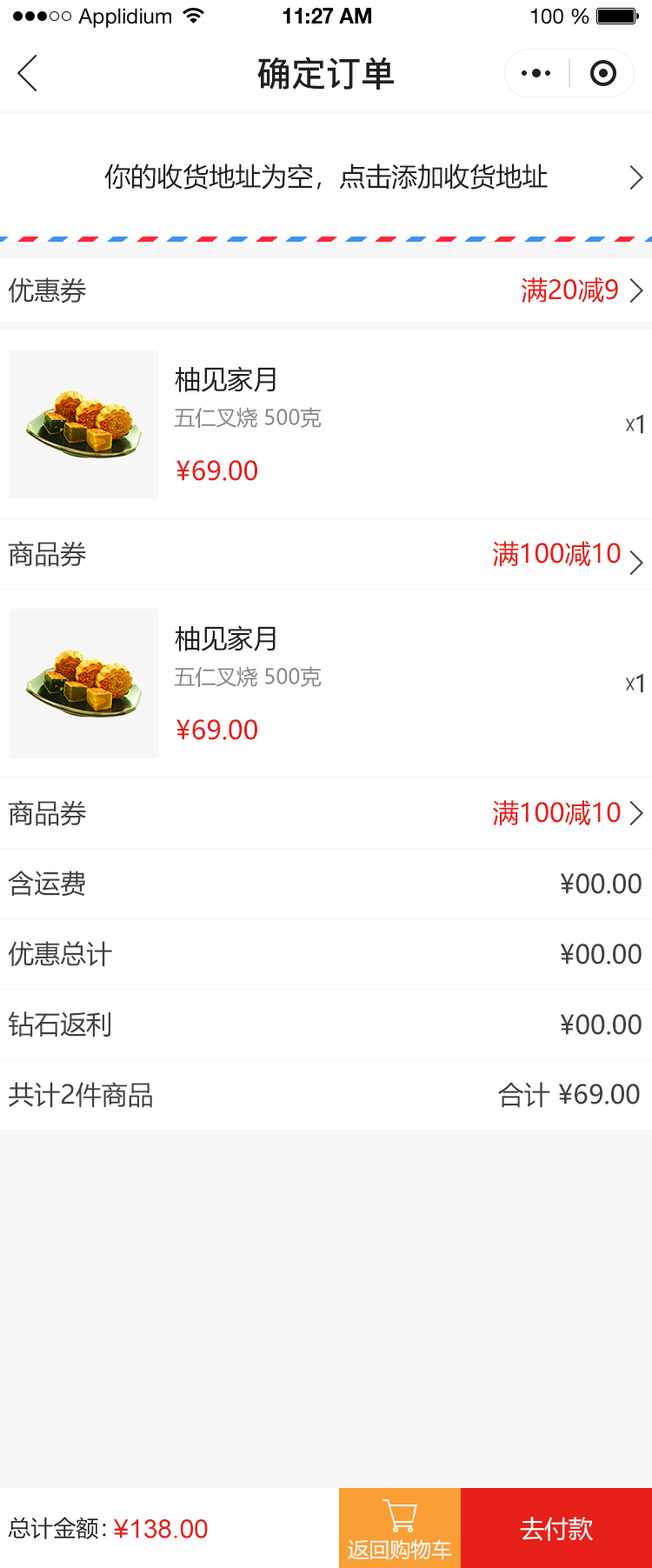
<style>
.page{position:relative;width:652px;height:1568px;background:#ffffff}
.page>*{position:absolute;margin:0}
.t1{font:20.9px "HelveticaNeueLTStd-Roman";color:#000000}
.t2{font:20.9px "HelveticaNeueLTStd-Bd";color:#000000}
.t3{font:34.8px "PingFang-SC-Bold";color:#202020;text-transform:uppercase}
.t4{font:26.1px "MicrosoftYaHei";color:#202020;text-transform:uppercase}
.t5{font:26.1px "MicrosoftYaHei";color:#404040;text-transform:uppercase}
.t6{font:26.1px "MicrosoftYaHei";color:#e61f18;text-transform:uppercase}
.t7{font:20.9px "MicrosoftYaHei";color:#888888;text-transform:uppercase}
.t8{font:24.4px "MicrosoftYaHei";color:#404040;text-transform:uppercase}
.t9{font:22.6px "MicrosoftYaHei";color:#202020;text-transform:uppercase}
.t10{font:24.4px "MicrosoftYaHei";color:#fffefe;text-transform:uppercase}
.t11{font:26.1px "ArialMT";color:#e61f18;text-transform:uppercase}
.t12{font:20.9px "MicrosoftYaHei";color:#fffefe;text-transform:uppercase}
</style>
<div class="page">
<p class="t1" style="left:78px;top:8px;width:93px;height:20px">Applidium</p>
<p class="t2" style="left:283px;top:8px;width:88px;height:15px">11:27 AM</p>
<p class="t1" style="left:531px;top:8px;width:59px;height:16px">100 %</p>
<p class="t3" style="left:257px;top:57px;width:137px;height:33px">确定订单</p>
<p class="t4" style="left:104px;top:163px;width:444px;height:27px">你的收货地址为空，点击添加收货地址</p>
<p class="t5" style="left:8px;top:277px;width:78px;height:27px">优惠券</p>
<p class="t6" style="left:521px;top:277px;width:97px;height:26px">满20减9</p>
<p class="t4" style="left:175px;top:366px;width:101px;height:26px">柚见家月</p>
<p class="t7" style="left:174px;top:407px;width:148px;height:21px">五仁叉烧 500克</p>
<p class="t8" style="left:637px;top:414px;width:7px;height:20px">1</p>
<p class="t6" style="left:177px;top:460px;width:80px;height:21px">¥69.00</p>
<p class="t5" style="left:8px;top:541px;width:78px;height:26px">商品券</p>
<p class="t6" style="left:493px;top:541px;width:128px;height:25px">满100减10</p>
<p class="t4" style="left:175px;top:625px;width:101px;height:26px">柚见家月</p>
<p class="t7" style="left:174px;top:666px;width:148px;height:21px">五仁叉烧 500克</p>
<p class="t8" style="left:637px;top:673px;width:7px;height:20px">1</p>
<p class="t6" style="left:177px;top:719px;width:80px;height:21px">¥69.00</p>
<p class="t5" style="left:8px;top:800px;width:78px;height:26px">商品券</p>
<p class="t6" style="left:493px;top:800px;width:128px;height:25px">满100减10</p>
<p class="t5" style="left:8px;top:871px;width:77px;height:26px">含运费</p>
<p class="t5" style="left:560px;top:873px;width:82px;height:21px">¥00.00</p>
<p class="t5" style="left:8px;top:941px;width:104px;height:26px">优惠总计</p>
<p class="t5" style="left:560px;top:944px;width:82px;height:20px">¥00.00</p>
<p class="t5" style="left:8px;top:1011px;width:102px;height:27px">钻石返利</p>
<p class="t5" style="left:560px;top:1014px;width:82px;height:21px">¥00.00</p>
<p class="t5" style="left:9px;top:1082px;width:143px;height:26px">共计2件商品</p>
<p class="t5" style="left:498px;top:1082px;width:142px;height:26px">合计 ¥69.00</p>
<p class="t9" style="left:8px;top:1517px;width:98px;height:22px">总计金额：</p>
<p class="t10" style="left:520px;top:1517px;width:73px;height:24px">去付款</p>
<p class="t11" style="left:114px;top:1519px;width:94px;height:19px">¥138.00</p>
<p class="t12" style="left:348px;top:1539px;width:104px;height:21px">返回购物车</p>
</div>
